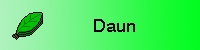
<style>
.page{position:relative;width:200px;height:50px}
.page>*{position:absolute;margin:0}
.t1{font:18px "Swiss721BT-Roman";color:#000000}
</style>
<div class="page">
<p class="t1" style="left:94px;top:19px;width:41px;height:13px">Daun</p>
</div>
